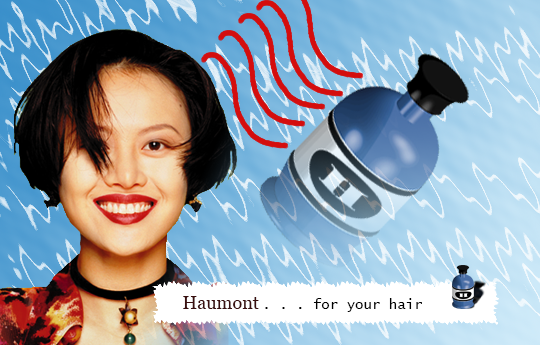
<style>
.page{position:relative;width:540px;height:345px}
.page>*{position:absolute;margin:0}
.t1{font:14px "LucidaConsole";color:#000000}
.t2{font:18px "Georgia";color:#3a1010}
</style>
<div class="page">
<p class="t1" style="left:183px;top:296px;width:239px;height:16px"><span class="t2">Haumont </span>. . . for your hair</p>
</div>
